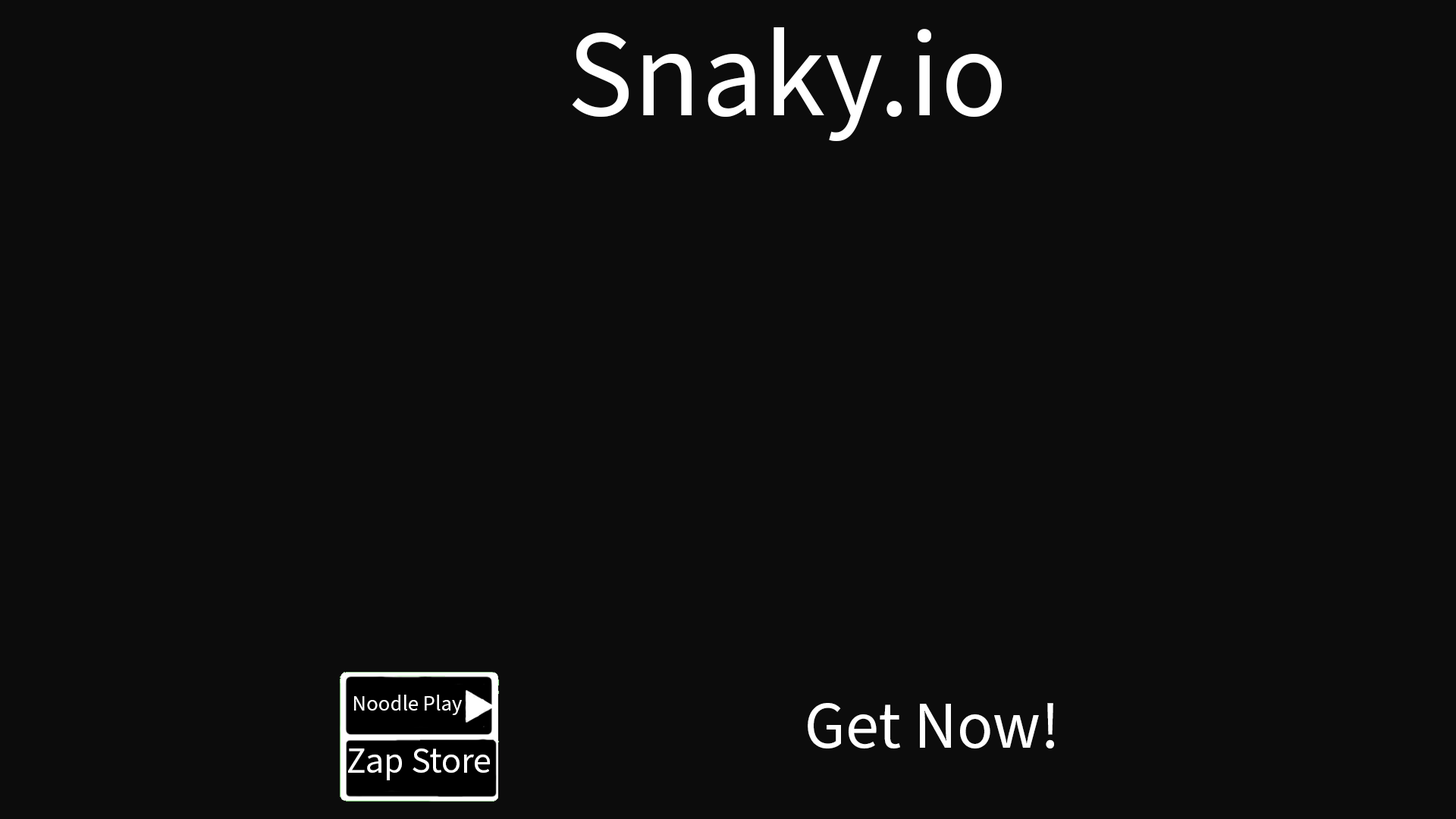
<style>
.page{position:relative;width:1456px;height:819px;background:#0c0c0c}
.page>*{position:absolute;margin:0}
.t1{font:123.9px "SourceSansPro-Regular";color:#ffffff}
.t2{font:21.9px "SourceSansPro-Regular";color:#ffffff}
.t3{font:66.5px "SourceSansPro-Regular";color:#ffffff}
.t4{font:36.1px "SourceSansPro-Regular";color:#ffffff}
</style>
<div class="page">
<p class="t1" style="left:572px;top:27px;width:430px;height:114px">Snaky.io</p>
<p class="t2" style="left:354px;top:695px;width:108px;height:20px">Noodle Play</p>
<p class="t3" style="left:808px;top:703px;width:246px;height:45px">Get Now!</p>
<p class="t4" style="left:348px;top:748px;width:142px;height:32px">Zap Store</p>
</div>
